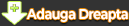
<style>
.page{position:relative;width:129px;height:26px;background:#333333}
.page>*{position:absolute;margin:0}
.t1{font:14.3px "Montserrat-Bold";letter-spacing:-0.04em;color:#ffffff;scale:0.88 1}
</style>
<div class="page">
<p class="t1" style="left:26px;top:8px;width:102px;height:14px">Adauga Dreapta</p>
</div>
